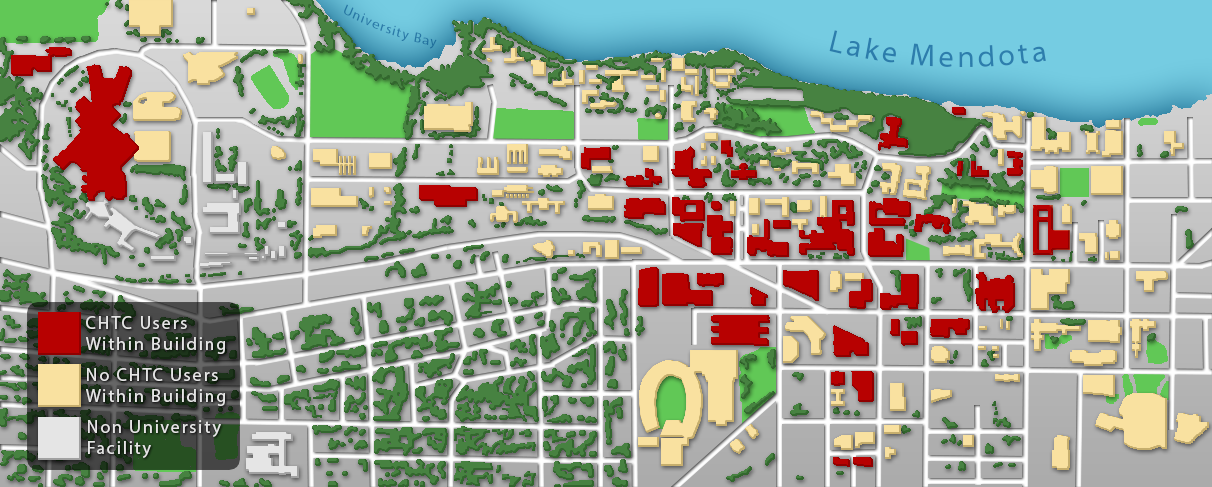
<style>
.page{position:relative;width:1212px;height:487px}
.page>*{position:absolute;margin:0}
.t1{font:13.4px "MyriadPro-Regular";letter-spacing:0.1em;color:#2d7ead}
.t2{font:29.8px "MyriadPro-Regular";letter-spacing:0.1em;color:#2d7ead}
.t3{font:18px "MyriadPro-Regular";letter-spacing:0.1em;color:#e5e5e5}
</style>
<div class="page">
<p class="t1" style="left:344px;top:4px;width:93px;height:45px;rotate:20deg">University Bay</p>
<p class="t2" style="left:829px;top:30px;width:217px;height:37px;rotate:3deg">Lake Mendota</p>
<p class="t3" style="left:86px;top:316px;width:139px;height:38px">CHTC Users<br>Within Building</p>
<p class="t3" style="left:86px;top:368px;width:139px;height:38px">No CHTC Users<br>Within Building</p>
<p class="t3" style="left:88px;top:420px;width:133px;height:38px">Non University<br>Facility</p>
</div>
